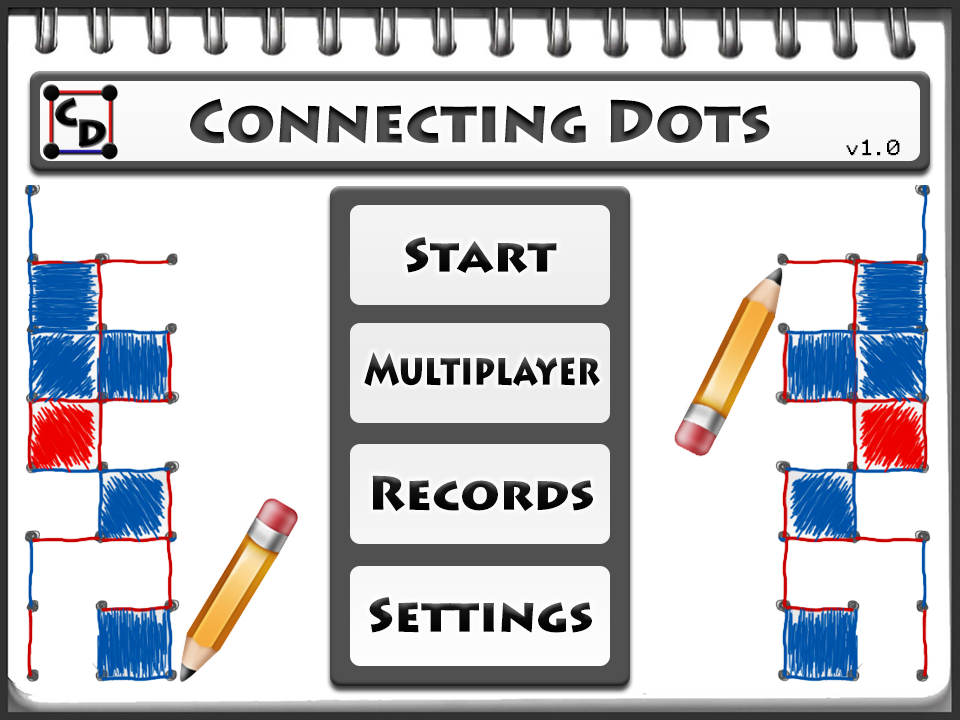
<style>
.page{position:relative;width:960px;height:720px;background:#ffffff}
.page>*{position:absolute;margin:0}
.t1{font:60px "LithosPro-Black";color:#444444}
.t2{font:18px "Terminal";color:#000000}
.t3{font:48px "LithosPro-Black";color:#000000}
.t4{font:44.3px "LithosPro-Black";color:#000000;scale:0.74 1}
</style>
<div class="page">
<p class="t1" style="left:190px;top:98px;width:580px;height:46px">Connecting Dots</p>
<p class="t2" style="left:846px;top:139px;width:54px;height:17px">v1.0</p>
<p class="t3" style="left:405px;top:237px;width:152px;height:37px">Start</p>
<p class="t4" style="left:364px;top:352px;width:236px;height:35px">Multiplayer</p>
<p class="t3" style="left:372px;top:475px;width:221px;height:37px">Records</p>
<p class="t3" style="left:369px;top:597px;width:223px;height:36px">Settings</p>
</div>
